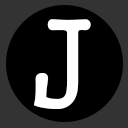
<style>
.page{position:relative;width:128px;height:128px;background:#000000}
.page>*{position:absolute;margin:0}
.t1{font:121px "GungsuhChe";color:#ffffff}
</style>
<div class="page">
<p class="t1" style="left:33px;top:19px;width:58px;height:90px">J</p>
</div>
